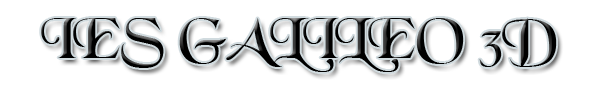
<style>
.page{position:relative;width:600px;height:100px;background:#ffffff}
.page>*{position:absolute;margin:0}
.t1{font:56px "BlackChancery";color:#000000}
</style>
<div class="page">
<p class="t1" style="left:41px;top:18px;width:516px;height:54px">IES GALILEO 3D</p>
</div>
